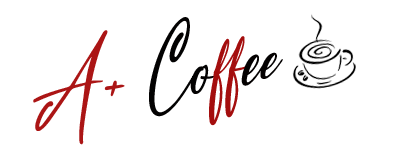
<style>
.page{position:relative;width:413px;height:156px;background:#ffffff}
.page>*{position:absolute;margin:0}
.t1{font:95.8px "Blue-Pen";color:#030202;font-style:italic}
.t2{font:95.8px "Blue-Pen";color:#ab1515;font-style:italic}
.t3{font:106.7px "Blue-Pen";color:#ab1515;font-style:italic}
.t4{font:95.8px "Blue-Pen";color:#a40e0e;font-style:italic}
.t5{font:95.8px "Blue-Pen";color:#040101;font-style:italic}
</style>
<div class="page">
<p class="t1" style="left:33px;top:17px;width:250px;height:128px;rotate:-10deg"><span class="t2">A</span><span class="t3">+ </span>Co<span class="t4">ff</span><span class="t5">ee</span></p>
</div>
